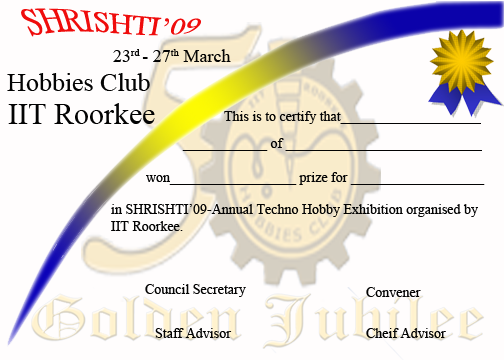
<style>
.page{position:relative;width:504px;height:360px;background:#fffdfd}
.page>*{position:absolute;margin:0}
.t1{font:30px "TimesNewRomanPSMT";color:#ef0c0c}
.t2{font:18px "TimesNewRomanPSMT";color:#030303}
.t3{font:26px "TimesNewRomanPSMT";color:#030303}
.t4{font:30px "TimesNewRomanPSMT";color:#030303}
.t5{font:14px "TimesNewRomanPSMT";color:#030303}
</style>
<div class="page">
<p class="t1" style="left:21px;top:8px;width:180px;height:29px">SHRISHTI’09</p>
<p class="t2" style="left:113px;top:49px;width:118px;height:13px">23rd - 27th March</p>
<p class="t3" style="left:7px;top:73px;width:143px;height:18px">Hobbies Club</p>
<p class="t4" style="left:8px;top:103px;width:147px;height:21px">IIT Roorkee</p>
<p class="t5" style="left:224px;top:111px;width:257px;height:13px">This is to certify that____________________</p>
<p class="t5" style="left:182px;top:138px;width:300px;height:13px">____________ of ____________________________</p>
<p class="t5" style="left:146px;top:172px;width:339px;height:13px">won__________________ prize for ___________________</p>
<p class="t5" style="left:111px;top:204px;width:367px;height:27px">in SHRISHTI’09-Annual Techno Hobby Exhibition organised by <br>IIT Roorkee.</p>
<p class="t5" style="left:145px;top:284px;width:101px;height:13px">Council Secretary</p>
<p class="t5" style="left:366px;top:287px;width:55px;height:10px">Convener</p>
<p class="t5" style="left:155px;top:328px;width:77px;height:10px">Staff Advisor</p>
<p class="t5" style="left:366px;top:328px;width:80px;height:10px">Cheif Advisor</p>
</div>
